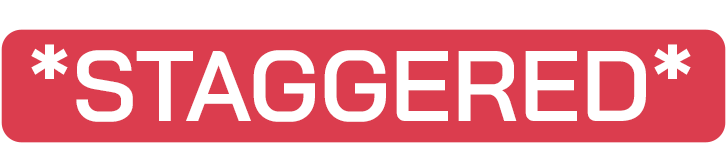
<style>
.page{position:relative;width:728px;height:166px;background:#db3d4e}
.page>*{position:absolute;margin:0}
.t1{font:100px "BaiJamjuree-SemiBold";color:#ffffff}
</style>
<div class="page">
<p class="t1" style="left:31px;top:44px;width:660px;height:78px">*STAGGERED*</p>
</div>
